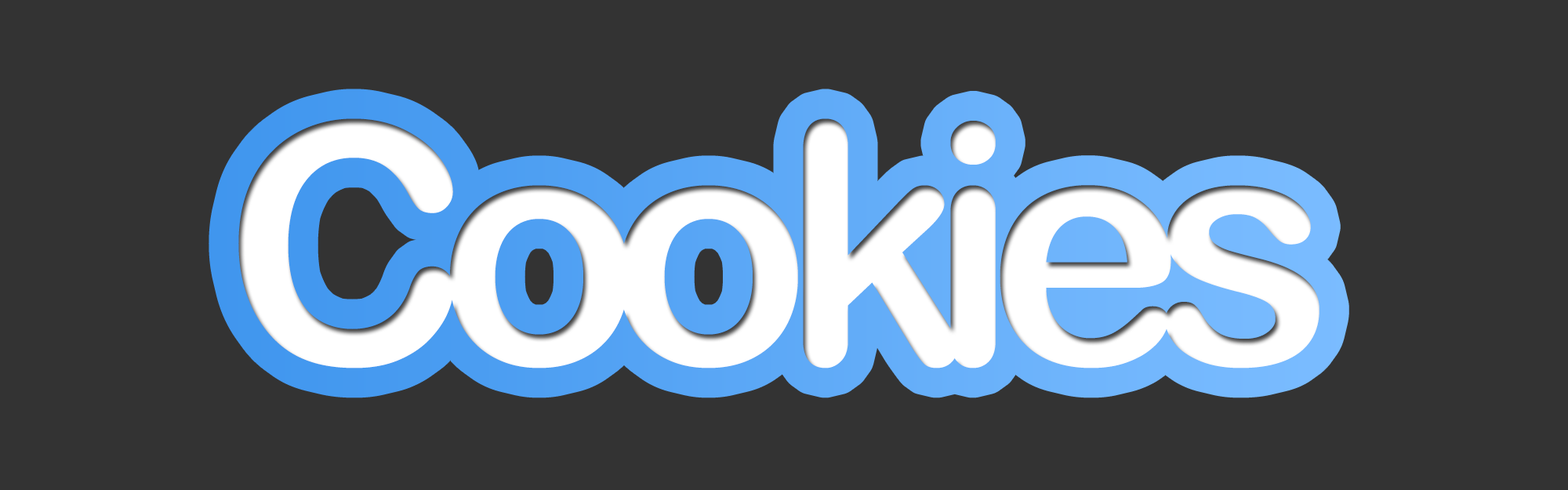
<style>
.page{position:relative;width:1568px;height:490px;background:#333333}
.page>*{position:absolute;margin:0}
.t1{font:336.5px "ArialRoundedMTBold";letter-spacing:-0.1em;color:#ffffff}
</style>
<div class="page">
<p class="t1" style="left:238px;top:118px;width:1081px;height:250px">Cookies</p>
</div>
